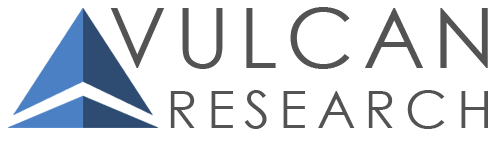
<style>
.page{position:relative;width:495px;height:143px;background:#ffffff}
.page>*{position:absolute;margin:0}
.t1{font:84px "CenturyGothic";letter-spacing:0.1em;color:#535353}
.t2{font:52px "CenturyGothic";letter-spacing:0.18em;color:#535353}
</style>
<div class="page">
<p class="t1" style="left:110px;top:7px;width:378px;height:62px">VULCAN</p>
<p class="t2" style="left:170px;top:90px;width:318px;height:39px">RESEARCH</p>
</div>
